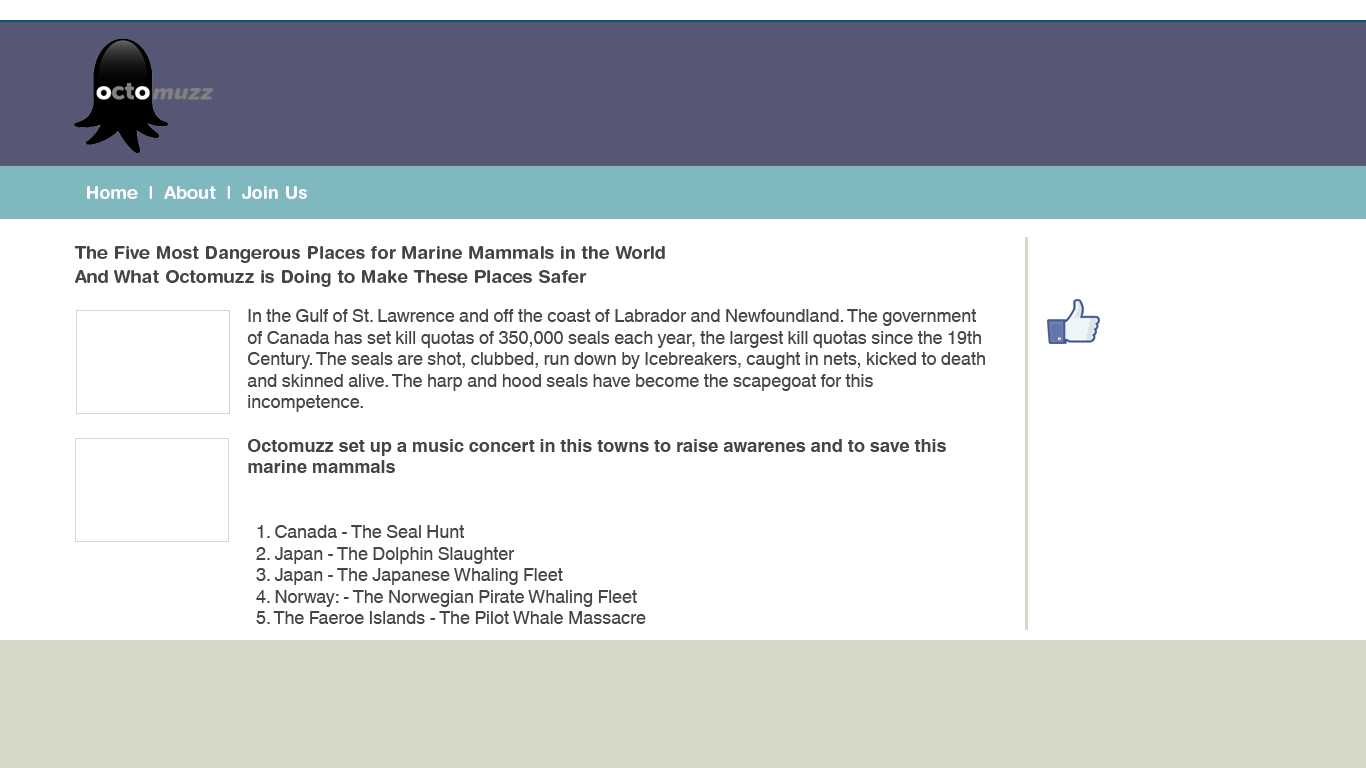
<style>
.page{position:relative;width:1366px;height:768px;background:#ffffff}
.page>*{position:absolute;margin:0}
.t1{font:18px "HelveticaRoundedLTStd-Bd";color:#fbfafb}
.t2{font:18px/24px "HelveticaRoundedLTStd-Bd";color:#484446}
.t3{font:18px "HelveticaWorld-Regular";color:#484446}
.t4{font:18px "HelveticaWorld-Bold";color:#484446}
</style>
<div class="page">
<p class="t1" style="left:87px;top:186px;width:220px;height:13px">Home  |  About  |  Join Us</p>
<p class="t2" style="left:74px;top:246px;width:591px;height:41px">The Five Most Dangerous Places for Marine Mammals in the World <br>And What Octomuzz is Doing to Make These Places Safer</p>
<p class="t3" style="left:247px;top:309px;width:738px;height:315px">In the Gulf of St. Lawrence and off the coast of Labrador and Newfoundland. The government of Canada has set kill quotas of 350,000 seals each year, the largest kill quotas since the 19th Century. The seals are shot, clubbed, run down by Icebreakers, caught in nets, kicked to death and skinned alive. The harp and hood seals have become the scapegoat for this incompetence. <br><br><span class="t4">Octomuzz set up a music concert in this towns to raise awarenes and to save this marine mammals<br></span><br> <br>  1. Canada - The Seal Hunt<br>  2. Japan - The Dolphin Slaughter<br>  3. Japan - The Japanese Whaling Fleet<br>  4. Norway: - The Norwegian Pirate Whaling Fleet<br>  5. The Faeroe Islands - The Pilot Whale Massacre<br>  6. The Solomon Islands - Dolphins Killing and Captures<br>  7. Iceland - Pirate whaling operations<br>  8. South Africa - Fur Seal Slaughter<br>  9. St. Lucia and St. Vincent and the Grenadines - the killing of whales and dolphins<br>10. The World's Oceans - International Pirate whaling and Poaching</p>
</div>
